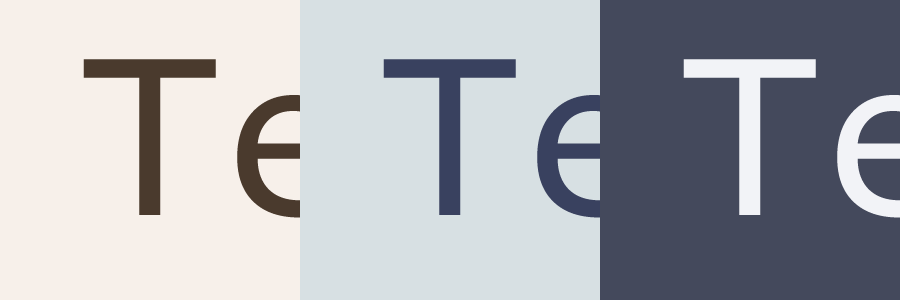
<style>
.page{position:relative;width:900px;height:300px;background:#d7e0e3}
.page>*{position:absolute;margin:0}
.t1{font:213.7px "Verdana";letter-spacing:0.05em}
</style>
<div class="page">
<p class="t1" style="left:83px;top:59px;width:649px;height:159px">Текст</p>
</div>
